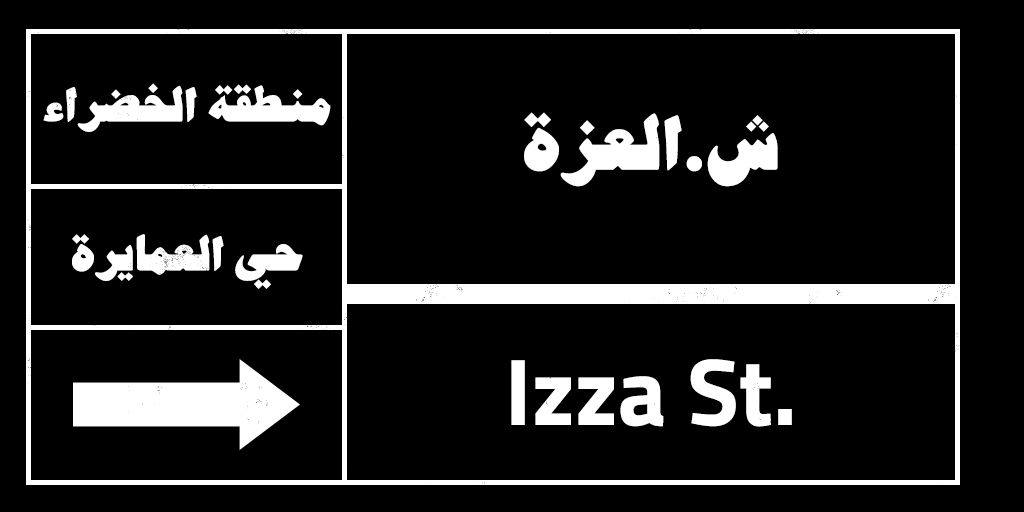
<style>
.page{position:relative;width:1024px;height:512px;background:#000000}
.page>*{position:absolute;margin:0}
.t1{font:60px "AlHarfAlJadid-One";color:#ffffff}
.t2{font:95px "AlHarfAlJadid-One";color:#ffffff}
.t3{font:95px "Cairo-Bold";color:#ffffff}
</style>
<div class="page">
<p class="t1" style="left:43px;top:83px;width:288px;height:49px">منطقة الخضراء</p>
<p class="t2" style="left:524px;top:112px;width:254px;height:75px">ش.العزة</p>
<p class="t1" style="left:72px;top:234px;width:231px;height:55px">حي العمايرة</p>
<p class="t3" style="left:511px;top:359px;width:281px;height:68px">Izza St.</p>
</div>
